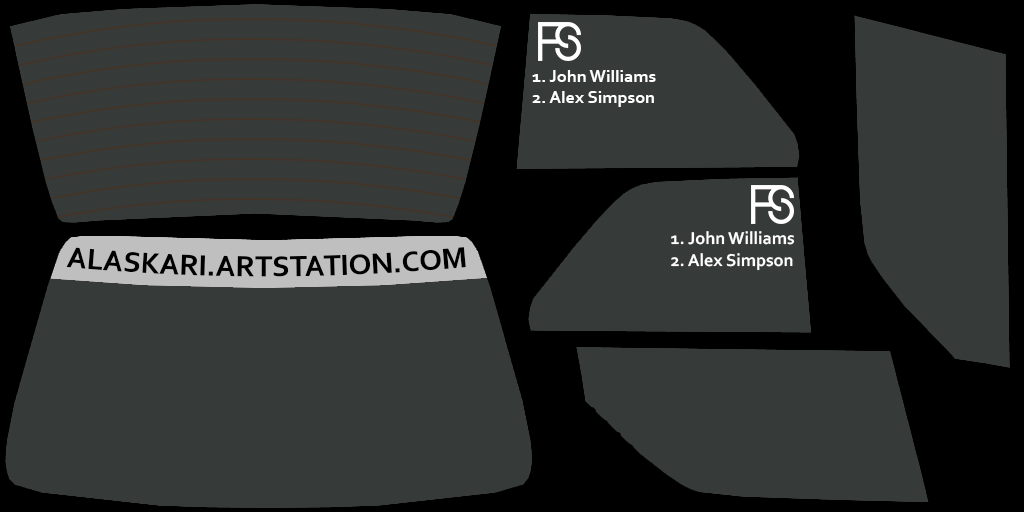
<style>
.page{position:relative;width:1024px;height:512px;background:#363a38}
.page>*{position:absolute;margin:0}
.t1{font:18px "Corbel-Bold";color:#ffffff}
.t2{font:30px "Corbel-Bold";color:#000000}
</style>
<div class="page">
<p class="t1" style="left:532px;top:70px;width:124px;height:37px">1. John Williams<br>2. Alex Simpson</p>
<p class="t1" style="left:671px;top:231px;width:124px;height:40px">1. John Williams<br>2. Alex Simpson</p>
<p class="t2" style="left:66px;top:247px;width:400px;height:30px">ALASKARI.ARTSTATION.COM</p>
</div>
